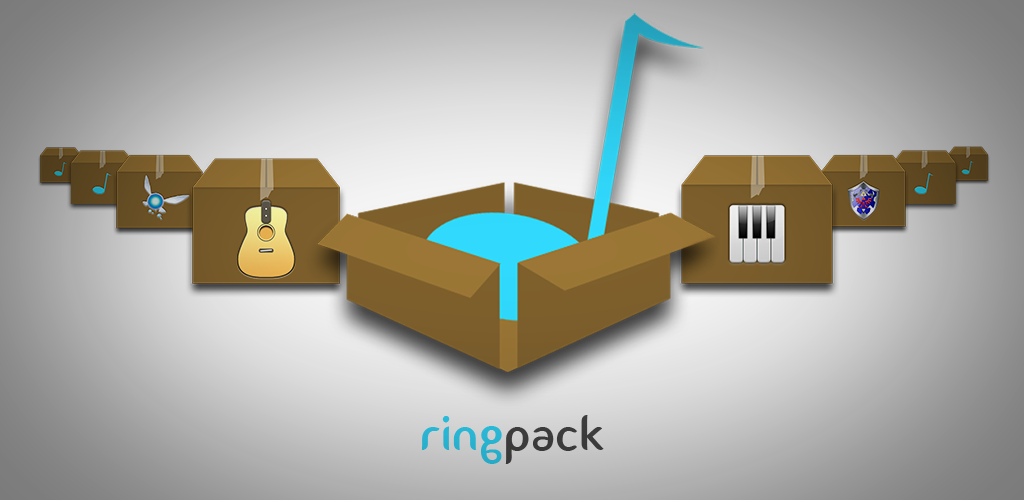
<style>
.page{position:relative;width:1024px;height:500px}
.page>*{position:absolute;margin:0}
.t1{font:48px "Fontastique";letter-spacing:0.01em}
</style>
<div class="page">
<p class="t1" style="left:421px;top:415px;width:183px;height:49px">ringpack</p>
</div>
